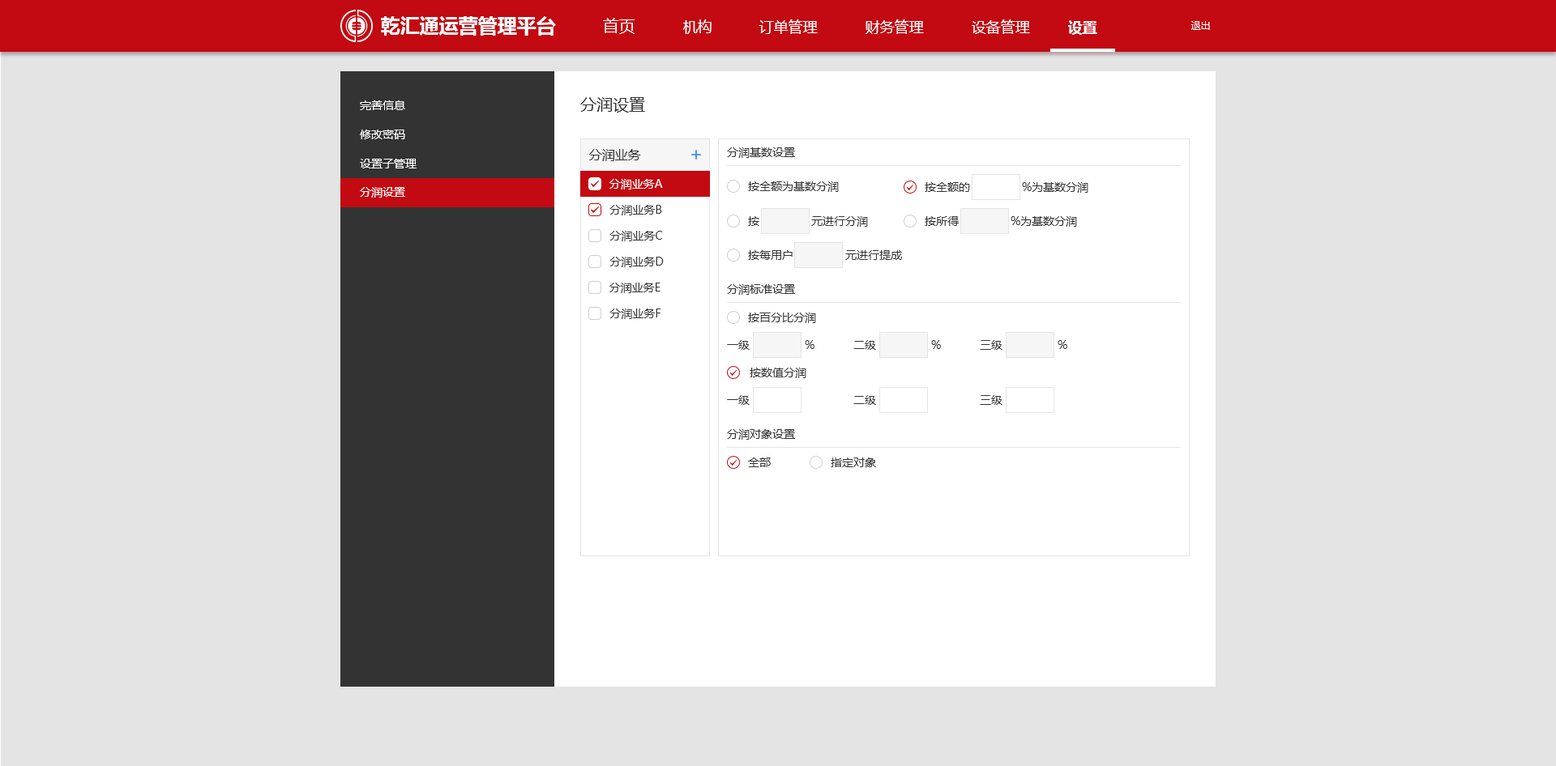
<style>
.page{position:relative;width:1556px;height:766px;background:#e4e4e4}
.page>*{position:absolute;margin:0}
.t1{font:19.4px "MicrosoftYaHei-Bold";color:#ffffff}
.t2{font:16.2px "MicrosoftYaHei";color:#ffffff}
.t3{font:14.6px "MicrosoftYaHei";color:#ffffff}
.t4{font:14.6px "MicrosoftYaHei-Bold";color:#ffffff}
.t5{font:9.7px "MicrosoftYaHei";color:#ffffff}
.t6{font:11.3px "MicrosoftYaHei";color:#ffffff}
.t7{font:16.2px "MicrosoftYaHei";color:#333333}
.t8{font:13px "MicrosoftYaHei";color:#333333}
.t9{font:11.3px "MicrosoftYaHei";color:#333333}
</style>
<div class="page">
<p class="t1" style="left:381px;top:16px;width:175px;height:20px">乾汇通运营管理平台</p>
<p class="t2" style="left:603px;top:18px;width:31px;height:16px">首页</p>
<p class="t3" style="left:683px;top:19px;width:28px;height:15px">机构</p>
<p class="t3" style="left:758px;top:19px;width:60px;height:15px">订单管理</p>
<p class="t3" style="left:865px;top:19px;width:59px;height:15px">财务管理</p>
<p class="t3" style="left:971px;top:19px;width:59px;height:15px">设备管理</p>
<p class="t4" style="left:1068px;top:20px;width:29px;height:15px">设置</p>
<p class="t5" style="left:1190px;top:21px;width:20px;height:9px">退出</p>
<p class="t6" style="left:360px;top:100px;width:45px;height:10px">完善信息</p>
<p class="t7" style="left:580px;top:97px;width:65px;height:16px">分润设置</p>
<p class="t6" style="left:360px;top:130px;width:45px;height:9px">修改密码</p>
<p class="t8" style="left:589px;top:149px;width:52px;height:12px">分润业务</p>
<p class="t9" style="left:727px;top:147px;width:68px;height:11px">分润基数设置</p>
<p class="t6" style="left:360px;top:159px;width:56px;height:10px">设置子管理</p>
<p class="t6" style="left:609px;top:179px;width:54px;height:11px">分润业务A</p>
<p class="t9" style="left:748px;top:181px;width:91px;height:11px">按全额为基数分润</p>
<p class="t9" style="left:924px;top:182px;width:164px;height:11px">按全额的                %为基数分润</p>
<p class="t6" style="left:360px;top:187px;width:45px;height:11px">分润设置</p>
<p class="t9" style="left:609px;top:205px;width:53px;height:11px">分润业务B</p>
<p class="t9" style="left:748px;top:216px;width:120px;height:11px">按                元进行分润</p>
<p class="t9" style="left:924px;top:216px;width:153px;height:11px">按所得                %为基数分润</p>
<p class="t9" style="left:609px;top:231px;width:53px;height:10px">分润业务C</p>
<p class="t9" style="left:609px;top:257px;width:55px;height:10px">分润业务D</p>
<p class="t9" style="left:748px;top:250px;width:154px;height:10px">按每用户                元进行提成</p>
<p class="t9" style="left:609px;top:283px;width:51px;height:10px">分润业务E</p>
<p class="t9" style="left:727px;top:284px;width:68px;height:11px">分润标准设置</p>
<p class="t9" style="left:609px;top:309px;width:52px;height:10px">分润业务F</p>
<p class="t9" style="left:748px;top:313px;width:68px;height:10px">按百分比分润</p>
<p class="t9" style="left:727px;top:340px;width:22px;height:10px">一级</p>
<p class="t9" style="left:805px;top:340px;width:9px;height:9px">%</p>
<p class="t9" style="left:853px;top:340px;width:23px;height:10px">二级</p>
<p class="t9" style="left:931px;top:340px;width:10px;height:9px">%</p>
<p class="t9" style="left:980px;top:340px;width:22px;height:10px">三级</p>
<p class="t9" style="left:1057px;top:340px;width:10px;height:9px">%</p>
<p class="t9" style="left:749px;top:368px;width:57px;height:10px">按数值分润</p>
<p class="t9" style="left:727px;top:395px;width:22px;height:10px">一级</p>
<p class="t9" style="left:853px;top:395px;width:23px;height:10px">二级</p>
<p class="t9" style="left:980px;top:395px;width:22px;height:10px">三级</p>
<p class="t9" style="left:727px;top:429px;width:68px;height:11px">分润对象设置</p>
<p class="t9" style="left:748px;top:458px;width:23px;height:10px">全部</p>
<p class="t9" style="left:831px;top:458px;width:45px;height:10px">指定对象</p>
</div>
